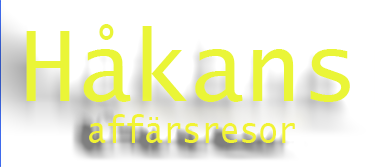
<style>
.page{position:relative;width:375px;height:167px;background:#ffffff}
.page>*{position:absolute;margin:0}
.t1{font:96.8px "LucidaSans-Typewriter";color:#eaf537;scale:0.96 1}
.t2{font:37.2px "LucidaSans-Typewriter";color:#f1f333;scale:0.85 1}
</style>
<div class="page">
<p class="t1" style="left:26px;top:24px;width:324px;height:78px">Håkans</p>
<p class="t2" style="left:89px;top:114px;width:206px;height:29px">affärsresor</p>
</div>
